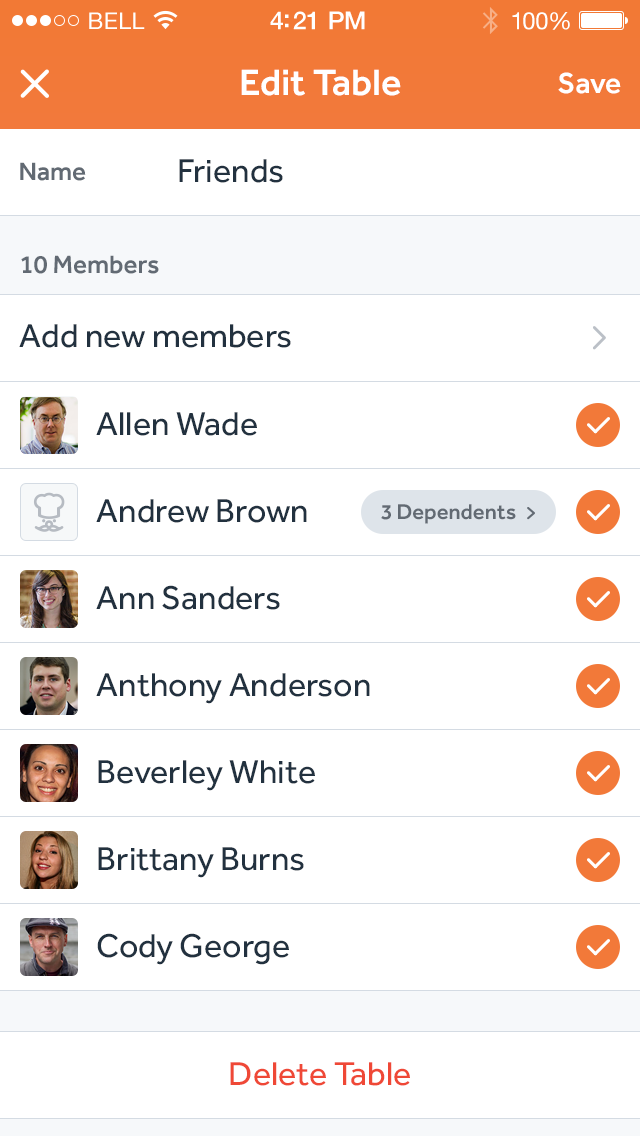
<style>
.page{position:relative;width:640px;height:1136px;background:#ffffff}
.page>*{position:absolute;margin:0}
.t1{font:23px "HelveticaNeue";letter-spacing:0.02em;color:#ffffff}
.t2{font:25px "HelveticaNeue-Medium";letter-spacing:-0.02em;color:#ffffff}
.t3{font:24px "HelveticaNeue";letter-spacing:-0.02em;color:#ffffff}
.t4{font:38px "Effra-Medium";color:#ffffff}
.t5{font:30px "Effra-Medium";color:#ffffff}
.t6{font:34px "Effra-Regular";color:#22313f}
.t7{font:26px "Effra-Medium";color:#626a73}
.t8{font:22px "Effra-Medium";color:#626a73}
.t9{font:34px "Effra-Regular";color:#ef4836}
</style>
<div class="page">
<p class="t1" style="left:89px;top:12px;width:56px;height:17px">BELL</p>
<p class="t2" style="left:270px;top:11px;width:95px;height:19px">4:21 PM</p>
<p class="t3" style="left:512px;top:12px;width:58px;height:18px">100%</p>
<p class="t4" style="left:241px;top:69px;width:160px;height:27px">Edit Table</p>
<p class="t5" style="left:558px;top:72px;width:63px;height:22px">Save</p>
<p class="t6" style="left:179px;top:159px;width:104px;height:24px">Friends</p>
<p class="t7" style="left:20px;top:162px;width:66px;height:19px">Name</p>
<p class="t7" style="left:21px;top:255px;width:138px;height:19px">10 Members</p>
<p class="t6" style="left:19px;top:324px;width:272px;height:24px">Add new members</p>
<p class="t6" style="left:96px;top:412px;width:161px;height:24px">Allen Wade</p>
<p class="t6" style="left:96px;top:499px;width:211px;height:24px">Andrew Brown</p>
<p class="t8" style="left:381px;top:504px;width:135px;height:20px">3 Dependents</p>
<p class="t6" style="left:96px;top:585px;width:184px;height:25px">Ann Sanders</p>
<p class="t6" style="left:96px;top:673px;width:274px;height:31px">Anthony Anderson</p>
<p class="t6" style="left:98px;top:760px;width:217px;height:31px">Beverley White</p>
<p class="t6" style="left:98px;top:847px;width:206px;height:31px">Brittany Burns</p>
<p class="t6" style="left:97px;top:933px;width:192px;height:32px">Cody George</p>
<p class="t9" style="left:230px;top:1062px;width:180px;height:24px">Delete Table</p>
</div>
